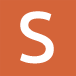
<style>
.page{position:relative;width:76px;height:76px;background:#d46439}
.page>*{position:absolute;margin:0}
.t1{font:74.5px "SukhumvitSet-SemiBold";color:#ffffff}
</style>
<div class="page">
<p class="t1" style="left:20px;top:11px;width:34px;height:53px">S</p>
</div>
